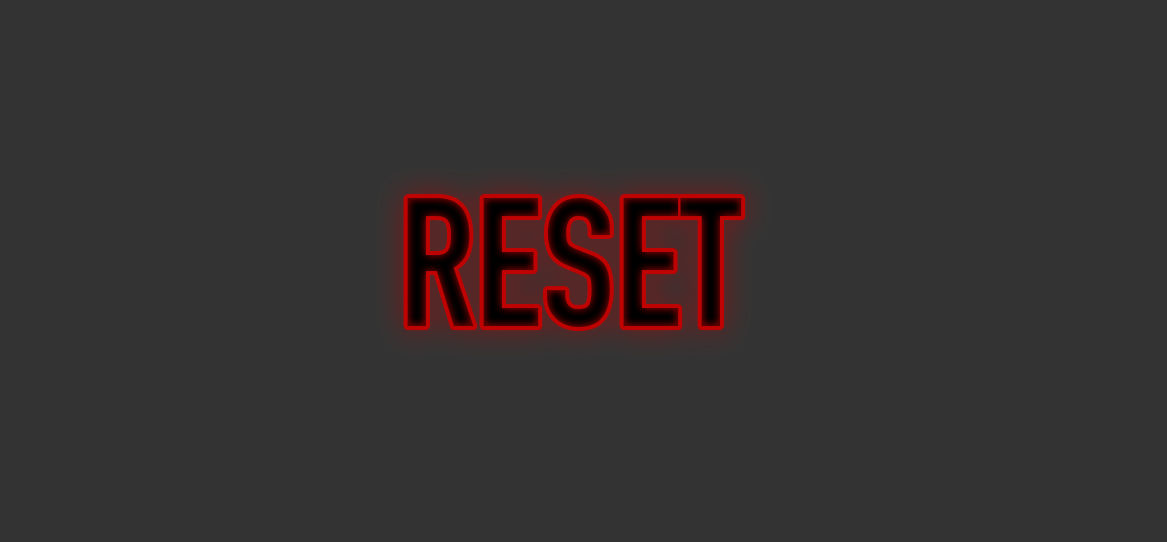
<style>
.page{position:relative;width:1167px;height:542px;background:#333333}
.page>*{position:absolute;margin:0}
.t1{font:179.5px "DINEngschrift"}
</style>
<div class="page">
<p class="t1" style="left:407px;top:198px;width:335px;height:129px">RESET</p>
</div>
